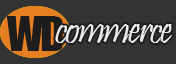
<style>
.page{position:relative;width:176px;height:64px;background:#333333}
.page>*{position:absolute;margin:0}
.t1{font:44.1px "Impact";letter-spacing:-0.05em;color:#1d1d1d}
.t2{font:42.7px "Pristina-Regular";letter-spacing:-0.05em;color:#ececec}
</style>
<div class="page">
<p class="t1" style="left:6px;top:16px;width:57px;height:35px">WD</p>
<p class="t2" style="left:55px;top:24px;width:117px;height:19px">commerce</p>
</div>
